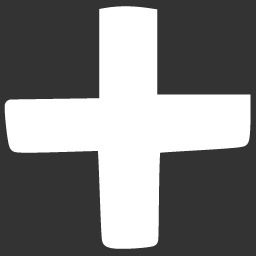
<style>
.page{position:relative;width:256px;height:256px;background:#333333}
.page>*{position:absolute;margin:0}
.t1{font:459.7px "MikadoBold";color:#ffffff;font-weight:bold;scale:1.05 1}
</style>
<div class="page">
<p class="t1" style="left:4px;top:6px;width:247px;height:243px">+</p>
</div>
